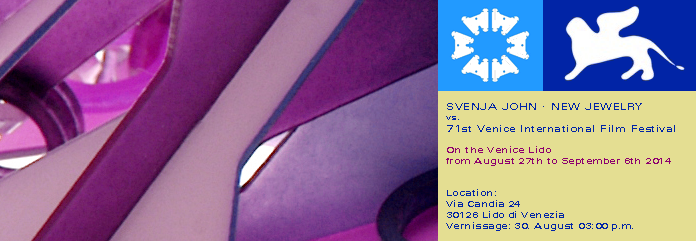
<style>
.page{position:relative;width:696px;height:241px;background:#e4de92}
.page>*{position:absolute;margin:0}
.t1{font:9px "ZurichBT-RomanExtended";letter-spacing:0.05em;color:#0124a6}
.t2{font:10px "ZurichBT-RomanExtended";letter-spacing:0.05em;color:#0124a6}
.t3{font:8px "ZurichBT-RomanExtended";letter-spacing:0.05em;color:#0124a6}
.t4{font:9px "ZurichBT-RomanExtended";letter-spacing:0.05em;color:#8d006e}
</style>
<div class="page">
<p class="t1" style="left:446px;top:103px;width:229px;height:128px"><span class="t2">SVENJA JOHN · NEW JEWELRY<br></span><span class="t3">vs.<br></span><span class="t2">71st Venice International Film Festival<br><br></span><span class="t4">On the Venice Lido <br>from August 27th to September 6th 2014<br></span><br><br>Location:<br>Via Candia 24 <br>30126 Lido di Venezia<br>Vernissage: 30. August 03:00 p.m.</p>
</div>
